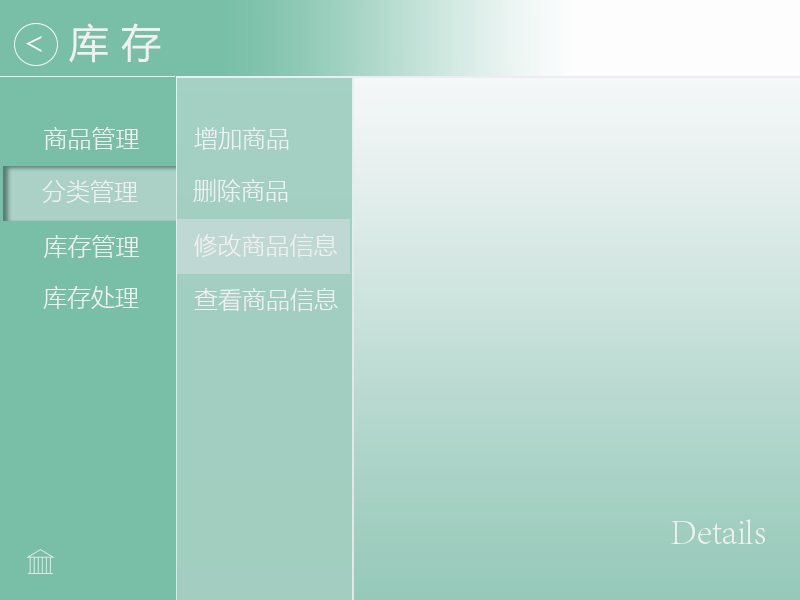
<style>
.page{position:relative;width:800px;height:600px}
.page>*{position:absolute;margin:0}
.t1{font:39.9px "MicrosoftYaHei";color:#f1f0f0}
.t2{font:24px "MicrosoftYaHeiLight";color:#f1f0f0}
.t3{font:36px "AdobeSongStd-Light";color:#f1f0f0}
</style>
<div class="page">
<p class="t1" style="left:69px;top:23px;width:92px;height:40px">库 存</p>
<p class="t2" style="left:44px;top:127px;width:95px;height:23px">商品管理</p>
<p class="t2" style="left:194px;top:127px;width:95px;height:23px">增加商品</p>
<p class="t2" style="left:42px;top:180px;width:96px;height:23px">分类管理</p>
<p class="t2" style="left:193px;top:179px;width:95px;height:23px">删除商品</p>
<p class="t2" style="left:44px;top:235px;width:95px;height:23px">库存管理</p>
<p class="t2" style="left:194px;top:234px;width:144px;height:24px">修改商品信息</p>
<p class="t2" style="left:43px;top:286px;width:96px;height:23px">库存处理</p>
<p class="t2" style="left:194px;top:288px;width:144px;height:24px">查看商品信息</p>
<p class="t3" style="left:671px;top:519px;width:94px;height:25px">Details</p>
</div>
